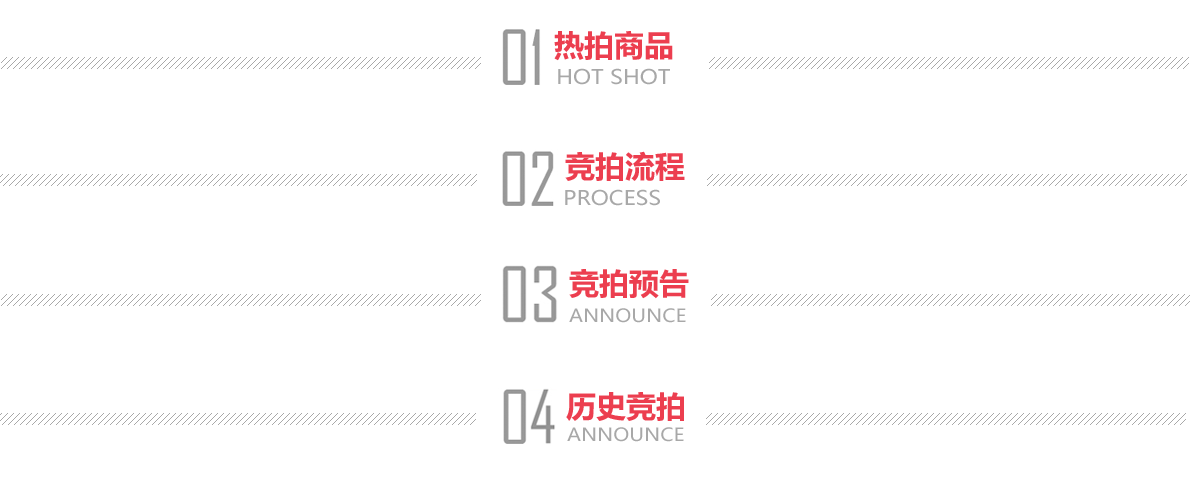
<style>
.page{position:relative;width:1190px;height:480px;background:#ffffff}
.page>*{position:absolute;margin:0}
.t1{font:30px "MicrosoftYaHei-Bold";color:#eb3244}
.t2{font:20px "MicrosoftYaHei";color:#a8a8a8;text-transform:uppercase;scale:1.1 1}
.t3{font:18px "MicrosoftYaHei";color:#a8a8a8;text-transform:uppercase;scale:1.1 1}
</style>
<div class="page">
<p class="t1" style="left:554px;top:31px;width:119px;height:30px;opacity:0.94">热拍商品</p>
<p class="t2" style="left:558px;top:68px;width:112px;height:17px">Hot shot</p>
<p class="t1" style="left:565px;top:151px;width:120px;height:30px;opacity:0.94">竞拍流程</p>
<p class="t2" style="left:565px;top:189px;width:95px;height:17px">process</p>
<p class="t1" style="left:569px;top:269px;width:120px;height:30px;opacity:0.94">竞拍预告</p>
<p class="t3" style="left:569px;top:308px;width:117px;height:15px">announce</p>
<p class="t1" style="left:566px;top:392px;width:118px;height:29px;opacity:0.94">历史竞拍</p>
<p class="t3" style="left:567px;top:427px;width:117px;height:15px">announce</p>
</div>
